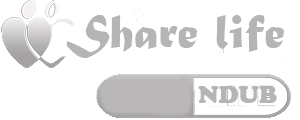
<style>
.page{position:relative;width:300px;height:120px;background:#ffffff}
.page>*{position:absolute;margin:0}
.t1{font:50px "MaturaMTScriptCapitals";color:#b6b4b4}
.t2{font:25px "CooperBlack";color:#b6b4b4}
</style>
<div class="page">
<p class="t1" style="left:66px;top:15px;width:218px;height:43px">Share life</p>
<p class="t2" style="left:198px;top:86px;width:79px;height:17px">NDUB</p>
</div>
